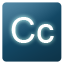
<style>
.page{position:relative;width:64px;height:64px}
.page>*{position:absolute;margin:0}
.t1{font:36px "ArialMT";color:#ffffff}
</style>
<div class="page">
<p class="t1" style="left:11px;top:17px;width:43px;height:26px">Cc</p>
</div>
